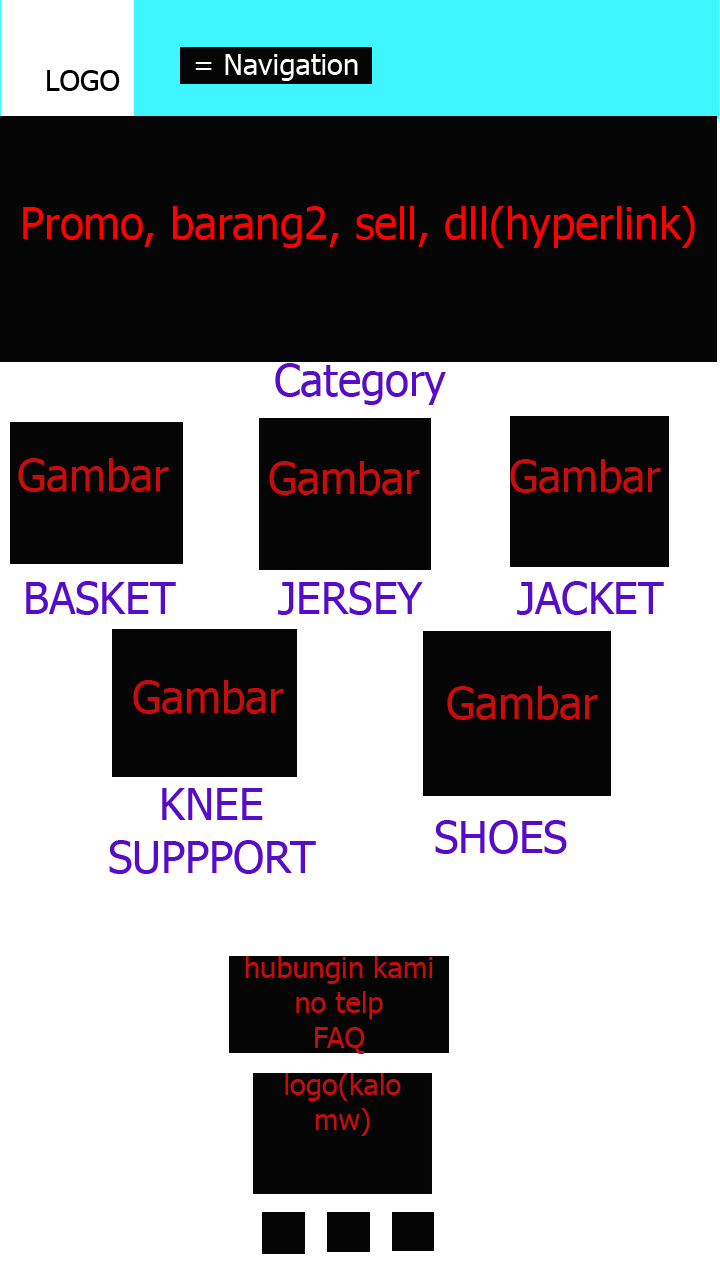
<style>
.page{position:relative;width:720px;height:1280px;background:#ffffff}
.page>*{position:absolute;margin:0}
.t1{font:29.2px "Tahoma";color:#ffffff}
.t2{font:29.2px "Tahoma";color:#010000}
.t3{font:43.8px "Tahoma";color:#fe0000}
.t4{font:43.8px "Tahoma";color:#570cc7}
.t5{font:43.8px "Tahoma";color:#c70c0d}
.t6{font:29.2px "Tahoma";color:#c70c0d}
</style>
<div class="page">
<p class="t1" style="left:195px;top:54px;width:163px;height:27px">= Navigation</p>
<p class="t2" style="left:47px;top:70px;width:73px;height:21px">LOGO</p>
<p class="t3" style="left:23px;top:206px;width:672px;height:42px">Promo, barang2, sell, dll(hyperlink)</p>
<p class="t4" style="left:275px;top:363px;width:171px;height:42px">Category</p>
<p class="t5" style="left:18px;top:458px;width:151px;height:34px">Gambar</p>
<p class="t5" style="left:269px;top:461px;width:151px;height:34px">Gambar</p>
<p class="t5" style="left:510px;top:459px;width:151px;height:34px">Gambar</p>
<p class="t4" style="left:26px;top:581px;width:150px;height:34px">BASKET</p>
<p class="t4" style="left:278px;top:581px;width:145px;height:34px">JERSEY</p>
<p class="t4" style="left:517px;top:581px;width:147px;height:34px">JACKET</p>
<p class="t5" style="left:133px;top:680px;width:151px;height:34px">Gambar</p>
<p class="t5" style="left:447px;top:686px;width:151px;height:34px">Gambar</p>
<p class="t4" style="left:109px;top:788px;width:207px;height:86px;text-align:center">KNEE SUPPPORT</p>
<p class="t4" style="left:435px;top:820px;width:132px;height:34px">SHOES</p>
<p class="t6" style="left:245px;top:956px;width:188px;height:98px;text-align:center">hubungin kami<br>no telp<br>FAQ</p>
<p class="t6" style="left:285px;top:1073px;width:116px;height:63px;text-align:center">logo(kalo<br>mw)</p>
</div>
